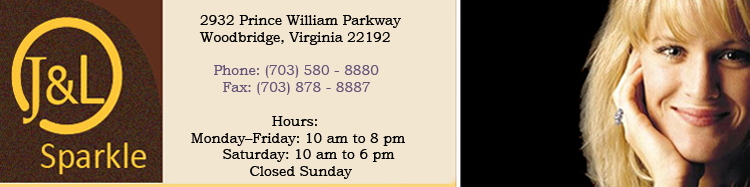
<style>
.page{position:relative;width:750px;height:187px;background:#f2e6d0}
.page>*{position:absolute;margin:0}
.t1{font:14px "BookmanOldStyle";color:#000000}
.t2{font:14px "BookmanOldStyle";color:#655379}
</style>
<div class="page">
<p class="t1" style="left:191px;top:15px;width:214px;height:164px">2932 Prince William Parkway<br> Woodbridge, Virginia 22192<br><br>    <span class="t2">Phone: (703) 580 - 8880<br>      Fax: (703) 878 - 8887<br></span><br>          Hours:<br>      Monday–Friday: 10 am to 8 pm<br>      Saturday: 10 am to 6 pm<br>     Closed Sunday</p>
</div>
